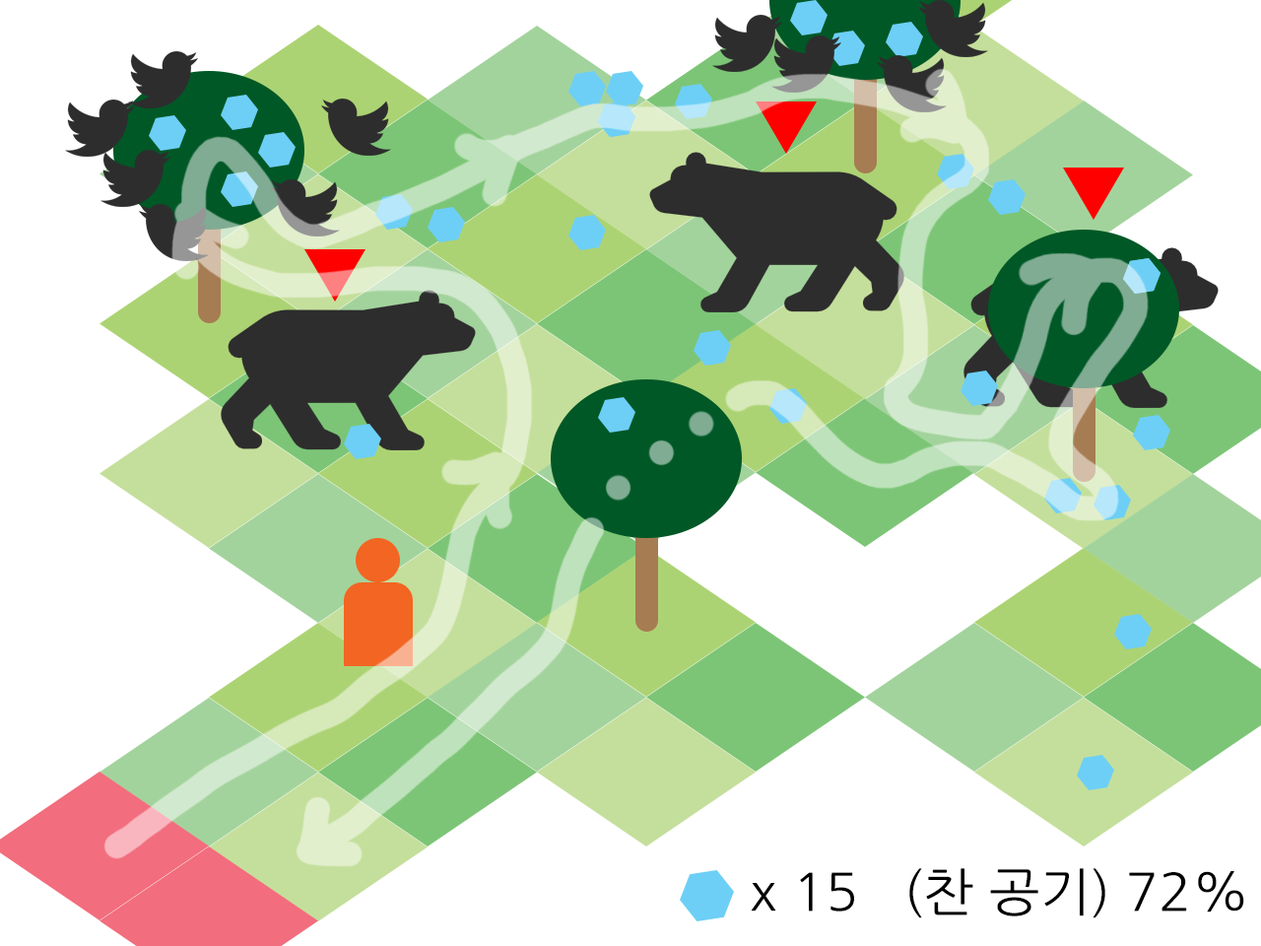
<style>
.page{position:relative;width:1261px;height:946px;background:#ffffff}
.page>*{position:absolute;margin:0}
.t1{font:51.5px "NanumGothic";color:#000000;scale:1.05 1}
</style>
<div class="page">
<p class="t1" style="left:909px;top:868px;width:335px;height:50px">(찬 공기) 72%</p>
<p class="t1" style="left:751px;top:872px;width:103px;height:39px">x 15</p>
</div>
